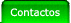
<style>
.page{position:relative;width:71px;height:23px}
.page>*{position:absolute;margin:0}
.t1{font:10px "Verdana";color:#ffffff}
</style>
<div class="page">
<p class="t1" style="left:10px;top:8px;width:50px;height:9px">Contactos</p>
</div>
